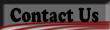
<style>
.page{position:relative;width:110px;height:30px;background:#696666}
.page>*{position:absolute;margin:0}
.t1{font:20px "CooperBlackStd";color:#000000;scale:0.75 1}
</style>
<div class="page">
<p class="t1" style="left:10px;top:7px;width:89px;height:16px">Contact Us</p>
</div>
